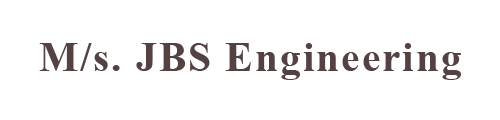
<style>
.page{position:relative;width:500px;height:120px;background:#ffffff}
.page>*{position:absolute;margin:0}
.t1{font:50px "ShonarBangla-Bold";letter-spacing:0.04em;color:#544141}
</style>
<div class="page">
<p class="t1" style="left:39px;top:43px;width:422px;height:37px">M/s. JBS Engineering</p>
</div>
